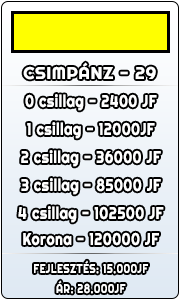
<style>
.page{position:relative;width:180px;height:300px}
.page>*{position:absolute;margin:0}
.t1{font:16.7px "Righteous-Regular";letter-spacing:0.035em;color:#ffffff;font-weight:bold}
.t2{font:16.7px "Righteous-Regular";letter-spacing:0.035em;color:#ffffff;font-weight:bold;scale:0.8 1}
.t3{font:12.5px "Righteous-Regular";letter-spacing:0.035em;color:#ffffff;font-weight:bold;scale:0.8 1}
</style>
<div class="page">
<p class="t1" style="left:23px;top:62px;width:133px;height:18px">CSIMPÁNZ - 29</p>
<p class="t2" style="left:25px;top:94px;width:132px;height:17px">0 csillag - 2400 JF</p>
<p class="t2" style="left:27px;top:122px;width:128px;height:17px">1 csillag - 12000JF</p>
<p class="t2" style="left:21px;top:150px;width:140px;height:17px">2 csillag - 36000 JF</p>
<p class="t2" style="left:21px;top:178px;width:140px;height:17px">3 csillag - 85000 JF</p>
<p class="t2" style="left:18px;top:206px;width:146px;height:17px">4 csillag - 102500 JF</p>
<p class="t2" style="left:23px;top:232px;width:136px;height:14px">Korona - 120000 JF</p>
<p class="t3" style="left:34px;top:260px;width:114px;height:14px">FEJLESZTÉS: 15.000JF</p>
<p class="t3" style="left:56px;top:280px;width:70px;height:14px">ÁR: 28.000JF</p>
</div>
